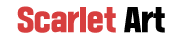
<style>
.page{position:relative;width:182px;height:39px;background:#ffffff}
.page>*{position:absolute;margin:0}
.t1{font:28px "SDGdGothic";color:#d73e3e}
.t2{font:28px "SDGdGothic";color:#000000}
</style>
<div class="page">
<p class="t1" style="left:17px;top:6px;width:148px;height:27px">Scarlet <span class="t2">Art</span></p>
</div>
